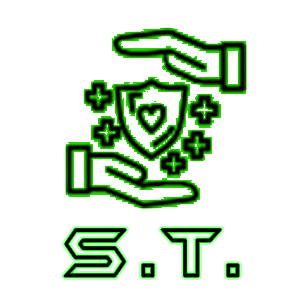
<style>
.page{position:relative;width:302px;height:302px;background:#ffffff}
.page>*{position:absolute;margin:0}
.t1{font:77.2px "BatmanForeverOutline";letter-spacing:0.2em;color:#010000;scale:0.92 1}
</style>
<div class="page">
<p class="t1" style="left:64px;top:229px;width:175px;height:48px">s.t.</p>
</div>
